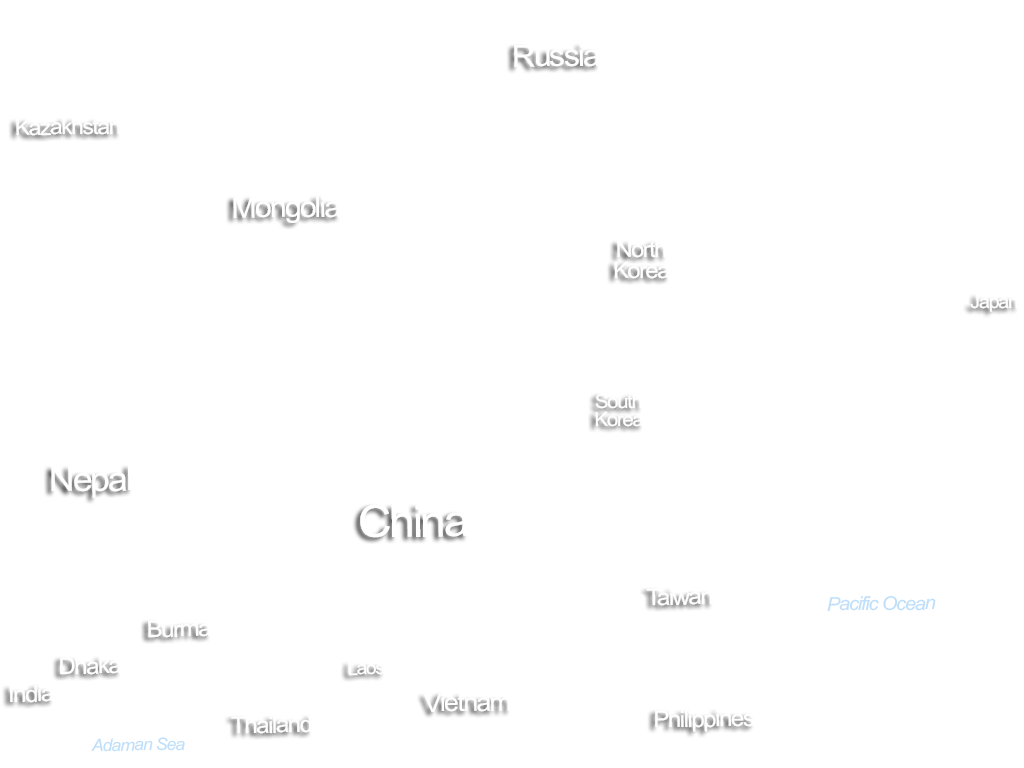
<style>
.page{position:relative;width:1024px;height:768px;background:#ffffff}
.page>*{position:absolute;margin:0}
.t1{font:30.4px "ArialMT";letter-spacing:-0.06em;color:#ffffff;scale:1.05 1}
.t2{font:21.6px "ArialMT";letter-spacing:-0.06em;color:#ffffff;scale:1.05 1}
.t3{font:28.7px "ArialMT";letter-spacing:-0.06em;color:#ffffff;scale:1.05 1}
.t4{font:22.3px/21px "ArialMT";letter-spacing:-0.06em;color:#ffffff;scale:1.05 1}
.t5{font:18.7px "ArialMT";letter-spacing:-0.06em;color:#ffffff;scale:1.05 1}
.t6{font:19.2px/18.1px "ArialMT";letter-spacing:-0.06em;color:#ffffff;scale:1.05 1}
.t7{font:33.9px "ArialMT";letter-spacing:-0.06em;color:#ffffff;scale:1.05 1}
.t8{font:44.5px "ArialMT";letter-spacing:-0.06em;color:#ffffff;scale:1.05 1}
.t9{font:22.7px "ArialMT";letter-spacing:-0.06em;color:#ffffff;scale:1.05 1}
.t10{font:19px "Arial-ItalicMT";letter-spacing:-0.06em;color:#bedefa;scale:1.05 1}
.t11{font:17.9px "ArialMT";letter-spacing:-0.06em;color:#ffffff;scale:1.05 1}
.t12{font:25.3px "ArialMT";letter-spacing:-0.06em;color:#ffffff;scale:1.05 1}
.t13{font:17px "Arial-ItalicMT";letter-spacing:-0.06em;color:#bedefa;scale:1.05 1}
</style>
<div class="page">
<p class="t1" style="left:514px;top:44px;width:86px;height:23px;rotate:-1deg">Russia</p>
<p class="t2" style="left:16px;top:118px;width:104px;height:18px;rotate:-1deg">Kazakhstan</p>
<p class="t3" style="left:233px;top:196px;width:107px;height:27px;rotate:-1deg">Mongolia</p>
<p class="t4" style="left:614px;top:240px;width:56px;height:39px;text-align:center;rotate:-1deg">North<br>Korea</p>
<p class="t5" style="left:970px;top:294px;width:48px;height:18px;rotate:-1deg">Japan</p>
<p class="t6" style="left:595px;top:393px;width:48px;height:34px;text-align:center;rotate:-1deg">South<br>Korea</p>
<p class="t7" style="left:51px;top:465px;width:81px;height:33px;rotate:-1deg">Nepal</p>
<p class="t8" style="left:360px;top:504px;width:108px;height:34px;rotate:-1deg">China</p>
<p class="t9" style="left:646px;top:588px;width:67px;height:18px;rotate:-1deg">Taiwan</p>
<p class="t10" style="left:827px;top:595px;width:109px;height:17px;rotate:-1deg">Pacific Ocean</p>
<p class="t9" style="left:148px;top:620px;width:63px;height:18px;rotate:-1deg">Burma</p>
<p class="t9" style="left:60px;top:656px;width:61px;height:19px;rotate:-1deg">Dhaka</p>
<p class="t11" style="left:348px;top:661px;width:37px;height:15px;rotate:-1deg">Laos</p>
<p class="t9" style="left:9px;top:684px;width:45px;height:19px;rotate:-1deg">India</p>
<p class="t12" style="left:424px;top:693px;width:86px;height:19px;rotate:-1deg">Vietnam</p>
<p class="t9" style="left:655px;top:709px;width:100px;height:23px;rotate:-1deg">Philippines</p>
<p class="t9" style="left:231px;top:715px;width:81px;height:19px;rotate:-1deg">Thailand</p>
<p class="t13" style="left:91px;top:737px;width:94px;height:15px;rotate:-1deg">Adaman Sea</p>
</div>
